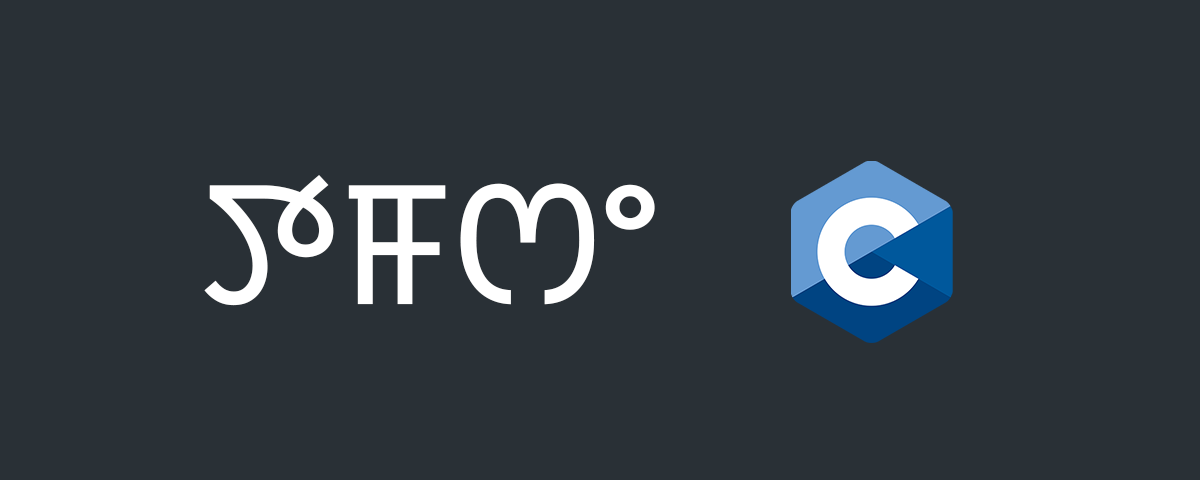
<style>
.page{position:relative;width:1200px;height:480px;background:#293036}
.page>*{position:absolute;margin:0}
.t1{font:180px "NotoSansMeeteiMayek-Regular";color:#ffffff}
</style>
<div class="page">
<p class="t1" style="left:204px;top:175px;width:451px;height:131px">ꯇꯝꯁꯦ</p>
</div>
